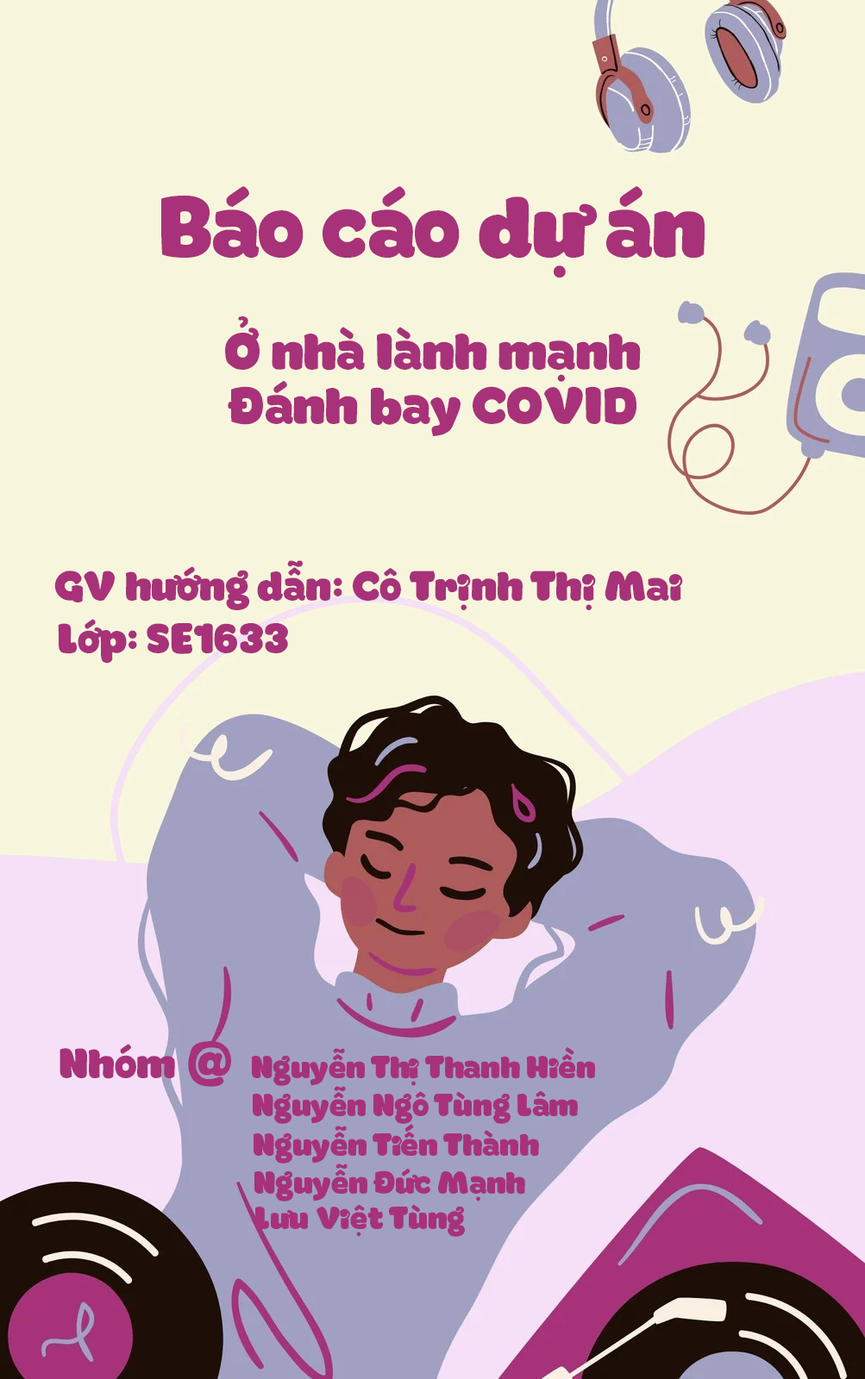
<style>
.page{position:relative;width:865px;height:1379px;background:#f8f5dd}
.page>*{position:absolute;margin:0}
.t1{font:86.2px "iCielKoni-Black";color:#a73279}
.t2{font:51.7px "iCielKoni-Black";color:#a73279}
.t3{font:41.4px "iCielKoni-Black";color:#a73279}
.t4{font:62.1px "iCielKoni-Black";color:#a73279}
.t5{font:31px "iCielKoni-Black";color:#a73279}
</style>
<div class="page">
<p class="t1" style="left:161px;top:186px;width:543px;height:92px">Báo cáo dự án</p>
<p class="t2" style="left:225px;top:316px;width:415px;height:66px">Ở nhà lành mạnh</p>
<p class="t2" style="left:228px;top:381px;width:408px;height:55px">Đánh bay COVID</p>
<p class="t3" style="left:54px;top:560px;width:629px;height:50px">GV hướng dẫn: Cô Trịnh Thị Mai</p>
<p class="t3" style="left:58px;top:619px;width:230px;height:44px">Lớp: SE1633</p>
<p class="t3" style="left:59px;top:1044px;width:116px;height:35px">Nhóm</p>
<p class="t4" style="left:188px;top:1041px;width:43px;height:46px">@</p>
<p class="t5" style="left:252px;top:1047px;width:343px;height:39px">Nguyễn Thị Thanh Hiền</p>
<p class="t5" style="left:253px;top:1086px;width:325px;height:38px">Nguyễn Ngô Tùng Lâm</p>
<p class="t5" style="left:253px;top:1124px;width:286px;height:40px">Nguyễn Tiến Thành</p>
<p class="t5" style="left:254px;top:1164px;width:271px;height:38px">Nguyễn Đức Mạnh</p>
<p class="t5" style="left:255px;top:1204px;width:210px;height:33px">Lưu Việt Tùng</p>
</div>
